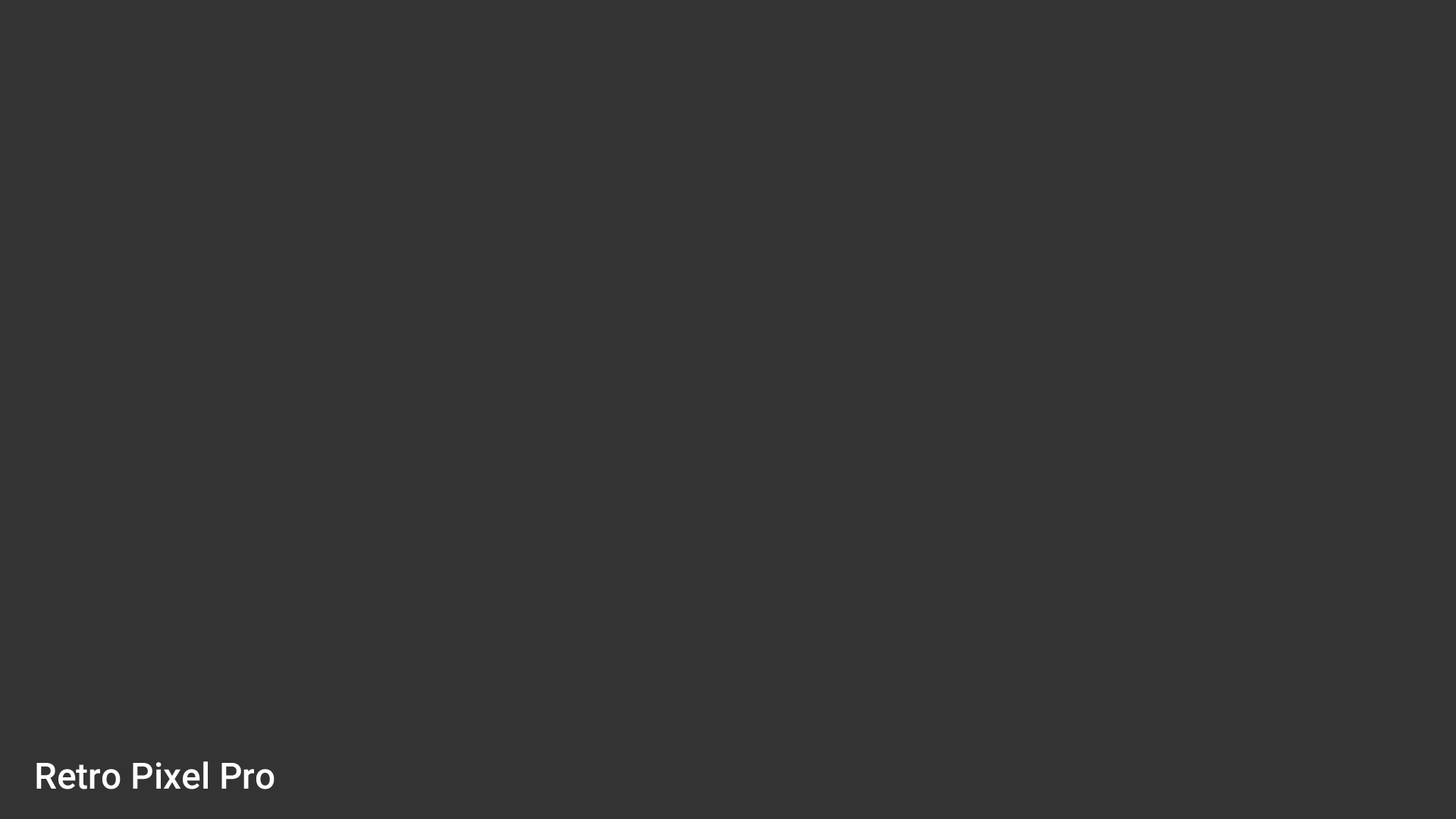
<style>
.page{position:relative;width:1456px;height:819px;background:#333333}
.page>*{position:absolute;margin:0}
.t1{font:36.3px "Roboto-Medium";color:#ffffff}
</style>
<div class="page">
<p class="t1" style="left:36px;top:761px;width:239px;height:28px">Retro Pixel Pro</p>
</div>
